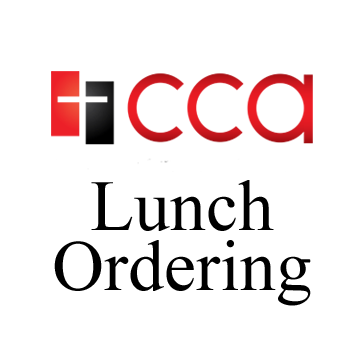
<style>
.page{position:relative;width:362px;height:362px;background:#ffffff}
.page>*{position:absolute;margin:0}
.t1{font:72px/60px "TimesNewRomanPSMT";color:#000000}
</style>
<div class="page">
<p class="t1" style="left:54px;top:180px;width:257px;height:126px;text-align:center">Lunch<br>Ordering</p>
</div>
